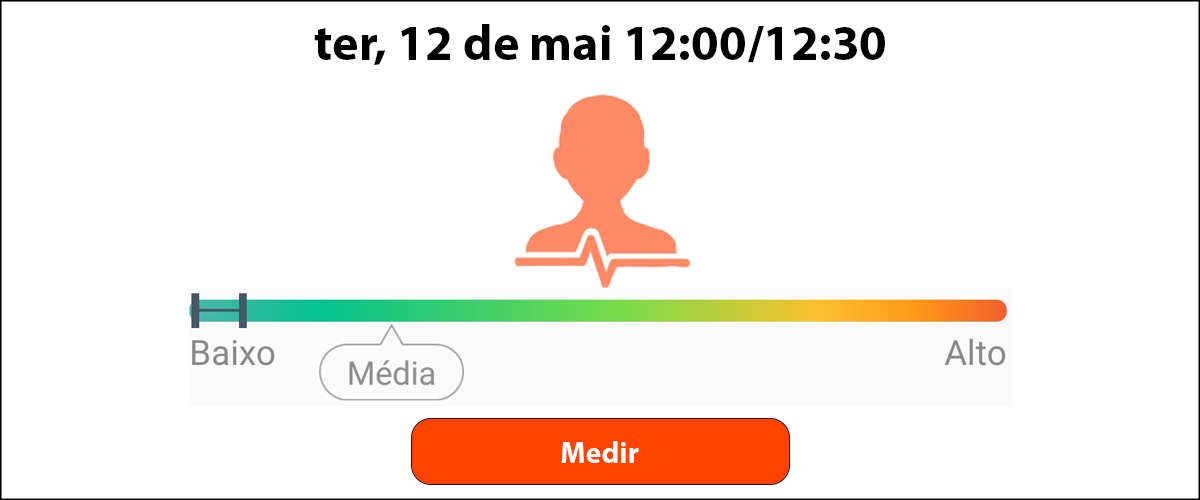
<style>
.page{position:relative;width:1200px;height:500px;background:#ffffff}
.page>*{position:absolute;margin:0}
.t1{font:50px "MyriadPro-Bold";color:#000000}
.t2{font:30px "MyriadPro-Bold";color:#ffffff}
</style>
<div class="page">
<p class="t1" style="left:314px;top:24px;width:571px;height:41px">ter, 12 de mai 12:00/12:30</p>
<p class="t2" style="left:561px;top:441px;width:78px;height:22px">Medir</p>
</div>
